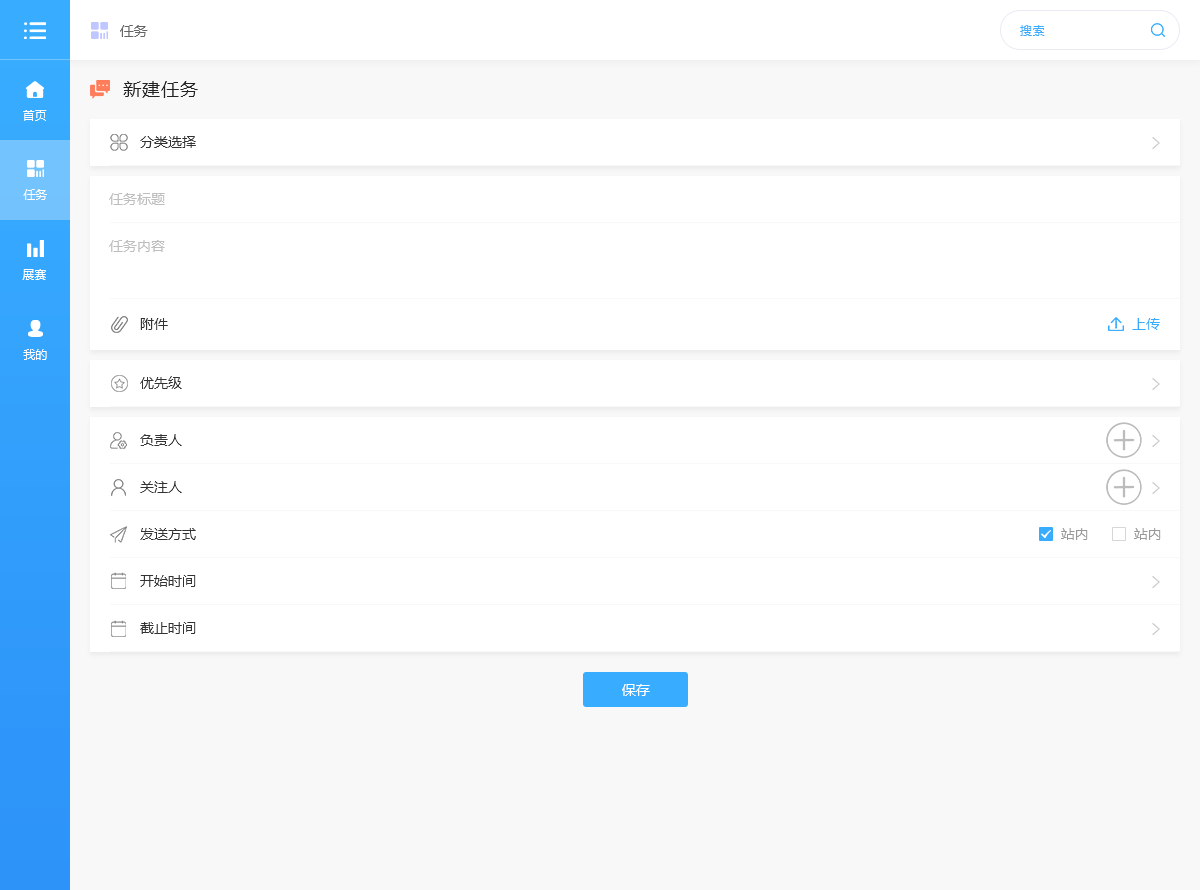
<style>
.page{position:relative;width:1200px;height:890px;background:#ffffff}
.page>*{position:absolute;margin:0}
.t1{font:14px "MicrosoftYaHei";color:#666666}
.t2{font:12px "MicrosoftYaHei";letter-spacing:0.05em;color:#38adff}
.t3{font:18px "MicrosoftYaHei";letter-spacing:0.05em;color:#222222}
.t4{font:12px "MicrosoftYaHei";color:#ffffff}
.t5{font:14px "MicrosoftYaHei";color:#333333}
.t6{font:14px "MicrosoftYaHei";color:#bebebe}
.t7{font:14px "MicrosoftYaHei";color:#38adff}
.t8{font:14px "MicrosoftYaHei";color:#999999}
.t9{font:14px "MicrosoftYaHei";color:#ffffff}
</style>
<div class="page">
<p class="t1" style="left:120px;top:25px;width:28px;height:12px">任务</p>
<p class="t2" style="left:1020px;top:25px;width:25px;height:11px">搜索</p>
<p class="t3" style="left:123px;top:81px;width:75px;height:17px">新建任务</p>
<p class="t4" style="left:23px;top:110px;width:24px;height:11px">首页</p>
<p class="t5" style="left:140px;top:136px;width:56px;height:12px">分类选择</p>
<p class="t4" style="left:23px;top:189px;width:24px;height:11px">任务</p>
<p class="t6" style="left:109px;top:193px;width:56px;height:12px">任务标题</p>
<p class="t6" style="left:109px;top:240px;width:56px;height:12px">任务内容</p>
<p class="t4" style="left:22px;top:269px;width:24px;height:11px">展赛</p>
<p class="t5" style="left:140px;top:318px;width:28px;height:12px">附件</p>
<p class="t7" style="left:1132px;top:318px;width:28px;height:12px">上传</p>
<p class="t4" style="left:23px;top:349px;width:24px;height:11px">我的</p>
<p class="t5" style="left:140px;top:376px;width:42px;height:13px">优先级</p>
<p class="t5" style="left:140px;top:434px;width:42px;height:12px">负责人</p>
<p class="t5" style="left:140px;top:481px;width:42px;height:12px">关注人</p>
<p class="t5" style="left:140px;top:528px;width:56px;height:12px">发送方式</p>
<p class="t8" style="left:1061px;top:528px;width:27px;height:12px">站内</p>
<p class="t8" style="left:1134px;top:528px;width:27px;height:12px">站内</p>
<p class="t5" style="left:140px;top:575px;width:56px;height:12px">开始时间</p>
<p class="t5" style="left:140px;top:622px;width:56px;height:12px">截止时间</p>
<p class="t9" style="left:622px;top:684px;width:28px;height:12px">保存</p>
</div>
